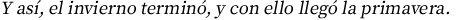
<style>
.page{position:relative;width:459px;height:20px;background:#ffffff}
.page>*{position:absolute;margin:0}
.t1{font:20px "OfficialFateFont-Medium";color:#000000;font-style:italic}
</style>
<div class="page">
<p class="t1" style="left:2px;top:0px;width:448px;height:19px">Y así, el invierno terminó, y con ello llegó la primavera.</p>
</div>
